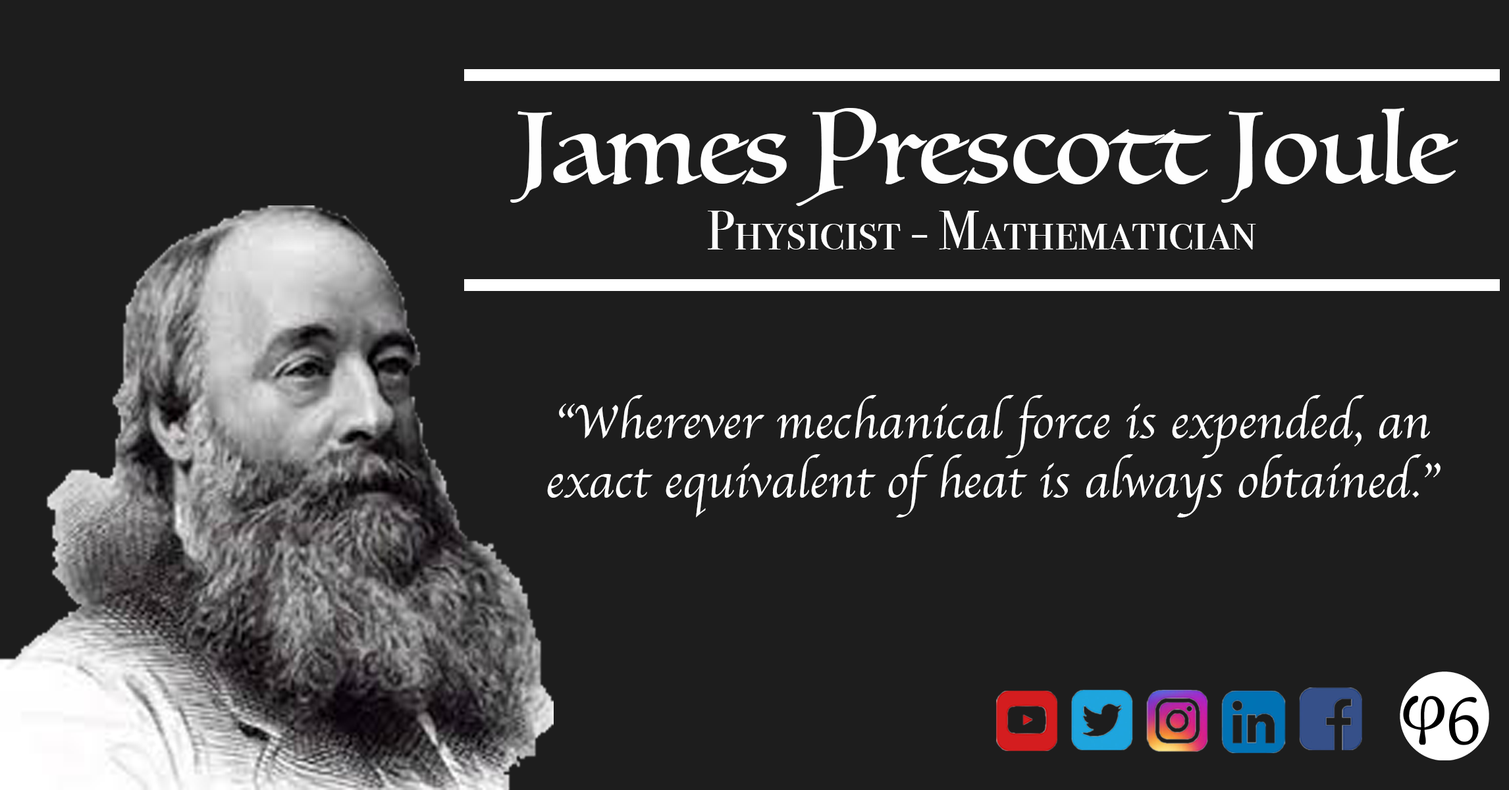
<style>
.page{position:relative;width:1509px;height:790px;background:#1d1d1d}
.page>*{position:absolute;margin:0}
.t1{font:98.8px "Luminari-Regular";color:#fefefe}
.t2{font:493.8px "IowanOldStyle-Roman";color:#fefefe}
.t3{font:54.9px "BodoniSvtyTwoSCITCTT-Book";color:#fefefe}
.t4{font:49.4px "Apple-Chancery";color:#fefefe}
</style>
<div class="page">
<p class="t1" style="left:510px;top:107px;width:948px;height:99px">James Prescott Joule <span class="t2">Prescott Joule</span></p>
<p class="t3" style="left:707px;top:211px;width:549px;height:39px">Physicist - Mathematician</p>
<p class="t4" style="left:547px;top:395px;width:894px;height:123px;text-align:center">“Wherever mechanical force is expended, an exact equivalent of heat is always obtained.”</p>
</div>
